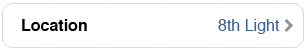
<style>
.page{position:relative;width:306px;height:50px;background:#ffffff}
.page>*{position:absolute;margin:0}
.t1{font:16px "Helvetica-Bold";color:#000000}
.t2{font:16px "Helvetica";color:#406397}
</style>
<div class="page">
<p class="t1" style="left:22px;top:19px;width:65px;height:12px">Location</p>
<p class="t2" style="left:218px;top:19px;width:62px;height:15px">8th Light</p>
</div>
